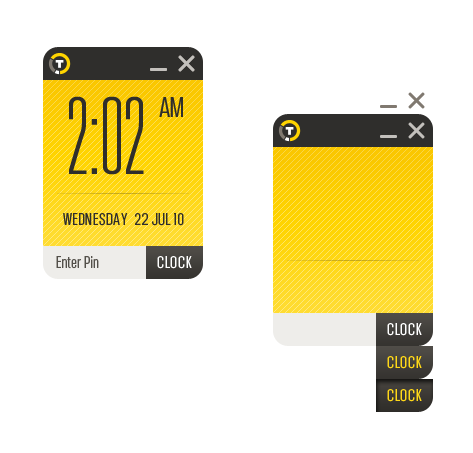
<style>
.page{position:relative;width:473px;height:453px;background:#ffffff}
.page>*{position:absolute;margin:0}
.t1{font:110px "ChromadicaThinUltraCondensed";letter-spacing:-0.01em;color:#2f2e2c}
.t2{font:28px "ChromadicaCondensed";letter-spacing:-0.01em;color:#2f2e2c}
.t3{font:17px "ChromadicaCondensed";letter-spacing:0.04em;color:#2f2e2c;text-transform:uppercase}
.t4{font:17px "ChromadicaCondensed";letter-spacing:0.02em;color:#595651}
.t5{font:17px "ChromadicaCondensed";letter-spacing:0.09em;color:#ffffff}
</style>
<div class="page">
<p class="t1" style="left:69px;top:96px;width:114px;height:79px">2:02 <span class="t2">AM</span></p>
<p class="t3" style="left:63px;top:213px;width:121px;height:13px">WEDNESDAY  22 JUL 10</p>
<p class="t4" style="left:56px;top:256px;width:43px;height:13px">Enter Pin</p>
<p class="t5" style="left:157px;top:256px;width:35px;height:13px">CLOCK</p>
</div>
